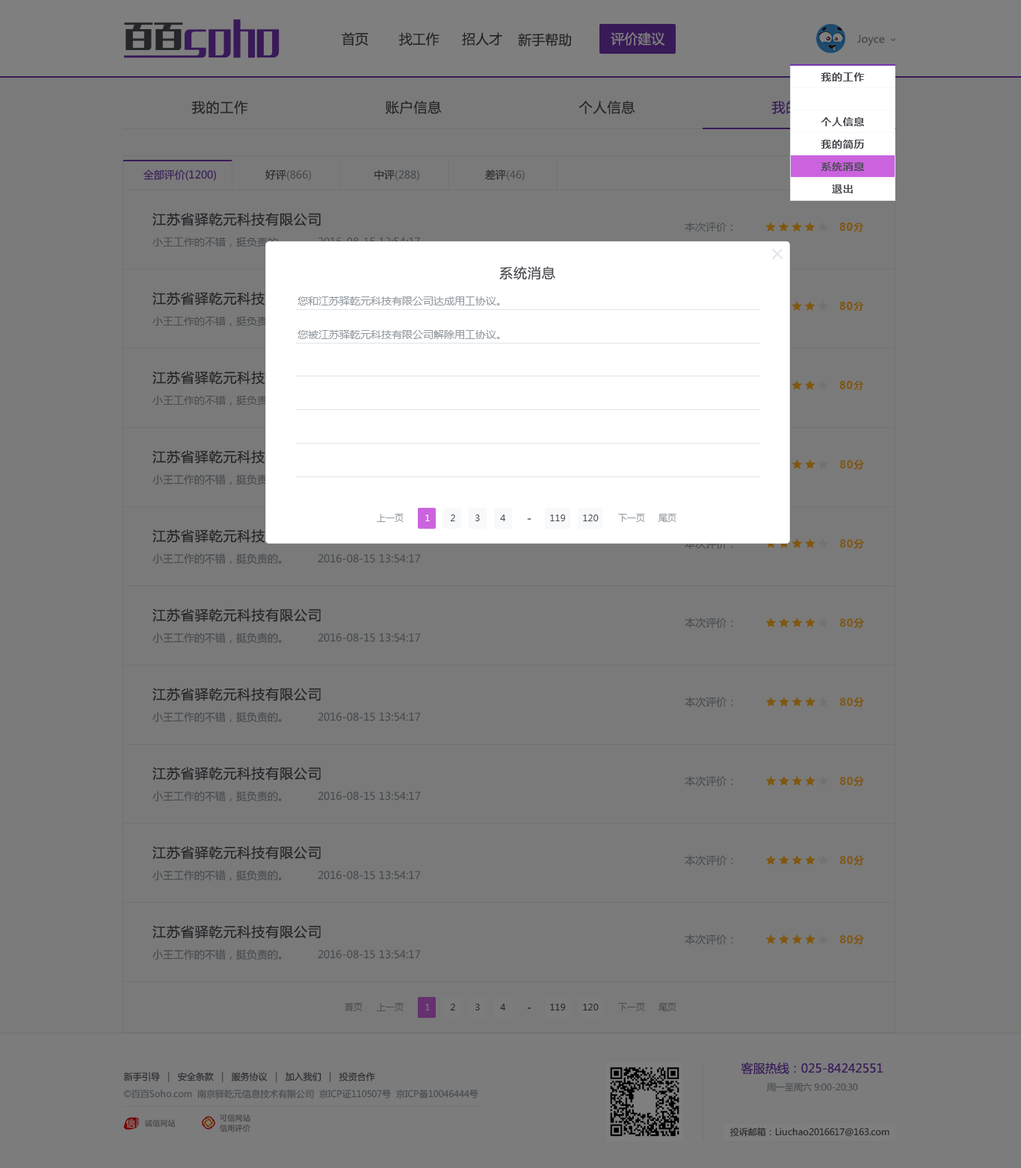
<style>
.page{position:relative;width:1021px;height:1168px;background:#7a7a7a}
.page>*{position:absolute;margin:0}
.t1{font:13.5px "MicrosoftYaHei";color:#26262a}
.t2{font:13.5px "MicrosoftYaHei";color:#7f7f7f}
.t3{font:10.5px "MicrosoftYaHei";color:#484c50}
.t4{font:10.5px/22.4px "MicrosoftYaHei-Bold";letter-spacing:0.05em;color:#4c4c54}
.t5{font:10.5px/22.4px "MicrosoftYaHei-Bold";letter-spacing:0.05em;color:#ffffff}
.t6{font:13.6px "MicrosoftYaHei";letter-spacing:0.05em;color:#26262a}
.t7{font:10.5px "MicrosoftYaHei";color:#391a58}
.t8{font:10.5px "MicrosoftYaHei";color:#9199a0}
.t9{font:10.5px "MicrosoftYaHei";color:#4c4c54}
.t10{font:10.5px "MicrosoftYaHei"}
.t11{font:13.4px "MicrosoftYaHei";letter-spacing:0.05em;color:#26262a}
.t12{font:10.5px "MicrosoftYaHei-Bold";letter-spacing:0.05em;color:#7f570f}
.t13{font:13.4px "MicrosoftYaHei";letter-spacing:0.05em;color:#4c4c54}
.t14{font:9px "MicrosoftYaHei";color:#9199a0}
.t15{font:9px "MicrosoftYaHei";color:#f7f7f7}
.t16{font:9px "MicrosoftYaHei";color:#4c4c54}
.t17{font:9px "MicrosoftYaHei";letter-spacing:-0.14em}
.t18{font:9px "MicrosoftYaHei";color:#484c50}
.t19{font:9px "MicrosoftYaHei";color:#7b7b7b}
.t20{font:9px "MicrosoftYaHei";color:#26262a}
.t21{font:9px "MicrosoftYaHei"}
.t22{font:12px "MicrosoftYaHei";color:#391a58}
</style>
<div class="page">
<p class="t1" style="left:341px;top:32px;width:27px;height:14px">首页</p>
<p class="t1" style="left:398px;top:32px;width:41px;height:14px">找工作</p>
<p class="t1" style="left:462px;top:32px;width:40px;height:14px">招人才</p>
<p class="t1" style="left:518px;top:33px;width:53px;height:14px">新手帮助</p>
<p class="t2" style="left:610px;top:32px;width:55px;height:14px">评价建议</p>
<p class="t3" style="left:857px;top:34px;width:28px;height:12px">Joyce</p>
<p class="t4" style="left:820px;top:72px;width:44px;height:121px;text-align:center">我的工作<br><span class="t5">个人账户<br></span>个人信息<br>我的简历<br>系统消息<br>退出</p>
<p class="t6" style="left:191px;top:101px;width:57px;height:13px">我的工作</p>
<p class="t6" style="left:385px;top:100px;width:57px;height:14px">账户信息</p>
<p class="t6" style="left:578px;top:100px;width:57px;height:14px">个人信息</p>
<p class="t7" style="left:143px;top:170px;width:74px;height:11px">全部评价(1200)</p>
<p class="t8" style="left:265px;top:170px;width:47px;height:11px"><span class="t9">好评</span>(866)</p>
<p class="t8" style="left:374px;top:170px;width:46px;height:11px"><span class="t9">中评</span>(288)</p>
<p class="t10" style="left:485px;top:170px;width:39px;height:11px">差评(46)</p>
<p class="t11" style="left:152px;top:212px;width:169px;height:14px">江苏省驿乾元科技有限公司</p>
<p class="t3" style="left:684px;top:223px;width:48px;height:9px">本次评价：</p>
<p class="t12" style="left:839px;top:223px;width:25px;height:9px">80分</p>
<p class="t13" style="left:499px;top:266px;width:56px;height:14px">系统消息</p>
<p class="t8" style="left:297px;top:297px;width:203px;height:9px">您和江苏驿乾元科技有限公司达成用工协议。</p>
<p class="t12" style="left:839px;top:302px;width:25px;height:9px">80分</p>
<p class="t8" style="left:297px;top:330px;width:203px;height:9px">您被江苏驿乾元科技有限公司解除用工协议。</p>
<p class="t12" style="left:839px;top:381px;width:25px;height:9px">80分</p>
<p class="t12" style="left:839px;top:459px;width:25px;height:11px">80分</p>
<p class="t14" style="left:377px;top:514px;width:26px;height:8px">上一页</p>
<p class="t15" style="left:425px;top:515px;width:5px;height:6px">1</p>
<p class="t16" style="left:450px;top:515px;width:5px;height:6px">2</p>
<p class="t16" style="left:475px;top:515px;width:5px;height:6px">3</p>
<p class="t16" style="left:500px;top:515px;width:5px;height:6px">4</p>
<p class="t17" style="left:527px;top:518px;width:3px;height:2px">...</p>
<p class="t16" style="left:550px;top:515px;width:15px;height:6px">119</p>
<p class="t16" style="left:583px;top:515px;width:15px;height:6px">120</p>
<p class="t14" style="left:618px;top:514px;width:27px;height:8px">下一页</p>
<p class="t14" style="left:658px;top:514px;width:18px;height:8px">尾页</p>
<p class="t12" style="left:839px;top:539px;width:25px;height:10px">80分</p>
<p class="t3" style="left:152px;top:554px;width:269px;height:11px">小王工作的不错，挺负责的。        2016-08-15 13:54:17</p>
<p class="t11" style="left:152px;top:608px;width:169px;height:14px">江苏省驿乾元科技有限公司</p>
<p class="t3" style="left:684px;top:618px;width:49px;height:10px">本次评价：</p>
<p class="t12" style="left:839px;top:618px;width:25px;height:10px">80分</p>
<p class="t3" style="left:152px;top:633px;width:269px;height:11px">小王工作的不错，挺负责的。        2016-08-15 13:54:17</p>
<p class="t11" style="left:152px;top:687px;width:169px;height:15px">江苏省驿乾元科技有限公司</p>
<p class="t3" style="left:684px;top:697px;width:49px;height:10px">本次评价：</p>
<p class="t12" style="left:839px;top:697px;width:25px;height:10px">80分</p>
<p class="t3" style="left:152px;top:712px;width:269px;height:11px">小王工作的不错，挺负责的。        2016-08-15 13:54:17</p>
<p class="t11" style="left:152px;top:767px;width:169px;height:14px">江苏省驿乾元科技有限公司</p>
<p class="t3" style="left:684px;top:776px;width:49px;height:11px">本次评价：</p>
<p class="t12" style="left:839px;top:776px;width:25px;height:11px">80分</p>
<p class="t3" style="left:152px;top:791px;width:269px;height:11px">小王工作的不错，挺负责的。        2016-08-15 13:54:17</p>
<p class="t11" style="left:152px;top:846px;width:169px;height:14px">江苏省驿乾元科技有限公司</p>
<p class="t3" style="left:684px;top:855px;width:49px;height:11px">本次评价：</p>
<p class="t12" style="left:839px;top:855px;width:25px;height:11px">80分</p>
<p class="t3" style="left:152px;top:870px;width:269px;height:12px">小王工作的不错，挺负责的。        2016-08-15 13:54:17</p>
<p class="t11" style="left:152px;top:925px;width:169px;height:14px">江苏省驿乾元科技有限公司</p>
<p class="t3" style="left:684px;top:935px;width:49px;height:10px">本次评价：</p>
<p class="t12" style="left:839px;top:935px;width:25px;height:10px">80分</p>
<p class="t3" style="left:152px;top:950px;width:269px;height:11px">小王工作的不错，挺负责的。        2016-08-15 13:54:17</p>
<p class="t18" style="left:344px;top:1003px;width:18px;height:9px">首页</p>
<p class="t18" style="left:377px;top:1003px;width:26px;height:9px">上一页</p>
<p class="t19" style="left:425px;top:1004px;width:5px;height:7px">1</p>
<p class="t20" style="left:450px;top:1004px;width:5px;height:7px">2</p>
<p class="t20" style="left:475px;top:1004px;width:5px;height:7px">3</p>
<p class="t20" style="left:500px;top:1004px;width:5px;height:7px">4</p>
<p class="t17" style="left:527px;top:1008px;width:3px;height:1px">...</p>
<p class="t20" style="left:550px;top:1004px;width:15px;height:7px">119</p>
<p class="t20" style="left:583px;top:1004px;width:15px;height:7px">120</p>
<p class="t18" style="left:618px;top:1003px;width:27px;height:9px">下一页</p>
<p class="t18" style="left:658px;top:1003px;width:18px;height:9px">尾页</p>
<p class="t21" style="left:123px;top:1072px;width:252px;height:11px">新手引导   |   安全条款   |   服务协议   |   加入我们   |   投资合作</p>
<p class="t22" style="left:740px;top:1062px;width:142px;height:13px">客服热线：025-84242551</p>
<p class="t18" style="left:767px;top:1083px;width:91px;height:9px">周一至周六 9:00-20:30</p>
<p class="t18" style="left:123px;top:1089px;width:355px;height:10px">©百百Soho.com  南京驿乾元信息技术有限公司  京ICP证110507号  京ICP备10046444号</p>
<p class="t20" style="left:729px;top:1127px;width:160px;height:10px">投诉邮箱：Liuchao2016617@163.com</p>
</div>
